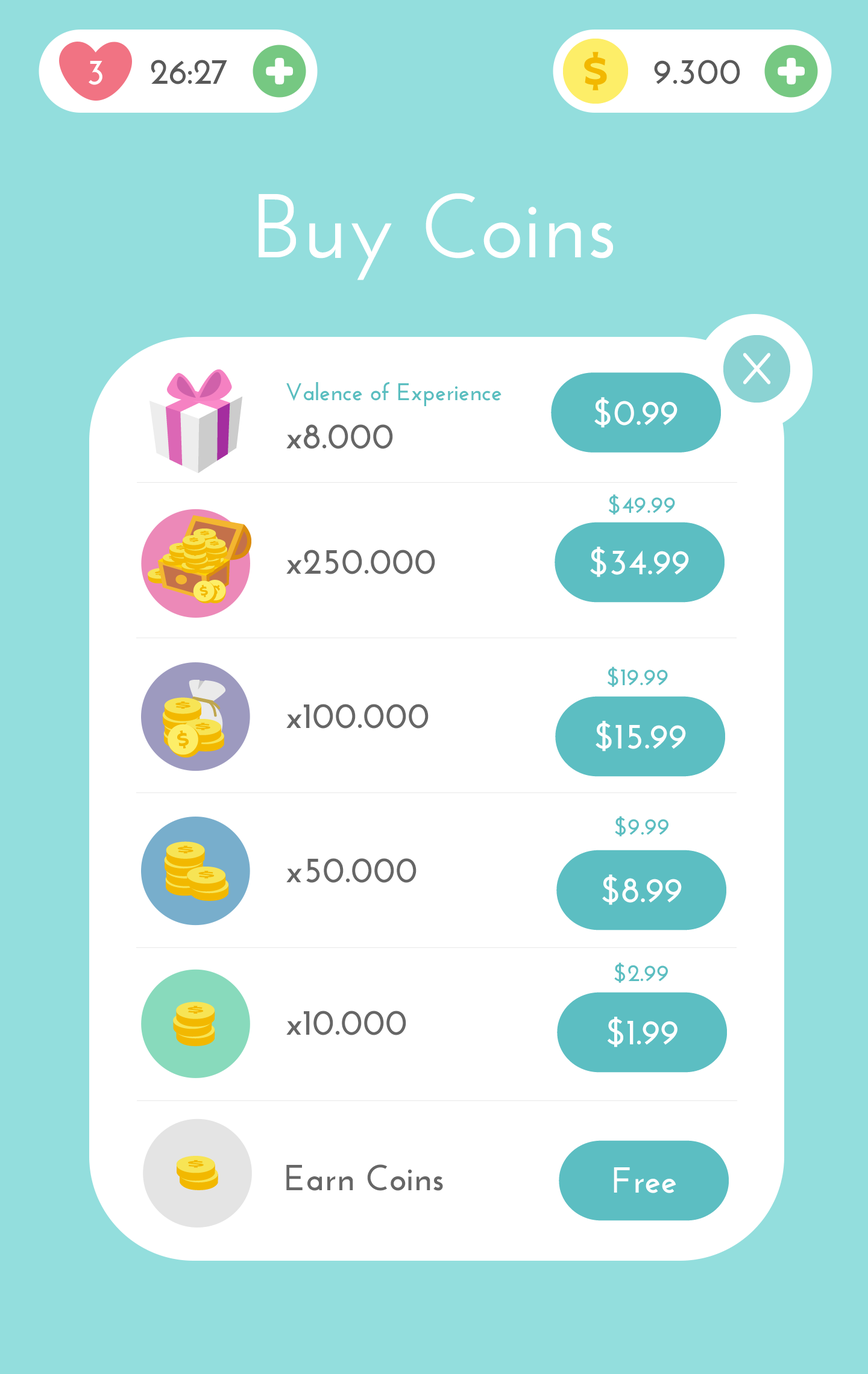
<style>
.page{position:relative;width:868px;height:1374px;background:#ffffff}
.page>*{position:absolute;margin:0}
.t1{font:36.2px "JosefinSans-Bold";color:#ffffff}
.t2{font:36.2px "JosefinSans-Bold";color:#595959}
.t3{font:90.4px "JosefinSans-SemiBold";color:#ffffff}
.t4{font:24.1px "JosefinSans-Bold";color:#5abec0}
.t5{font:36.2px "JosefinSans-Bold";color:#666666}
.t6{font:24.1px "JosefinSans-Bold";color:#5bbec1}
</style>
<div class="page">
<p class="t1" style="left:89px;top:61px;width:13px;height:24px">3</p>
<p class="t2" style="left:151px;top:60px;width:76px;height:24px">26:27</p>
<p class="t2" style="left:654px;top:60px;width:86px;height:24px">9.300</p>
<p class="t3" style="left:259px;top:193px;width:354px;height:87px">Buy Coins</p>
<p class="t4" style="left:286px;top:382px;width:215px;height:24px">Valence of Experience</p>
<p class="t1" style="left:594px;top:397px;width:83px;height:31px">$0.99</p>
<p class="t5" style="left:286px;top:424px;width:107px;height:25px">x8.000</p>
<p class="t6" style="left:609px;top:494px;width:66px;height:21px">$49.99</p>
<p class="t5" style="left:286px;top:550px;width:149px;height:24px">x250.000</p>
<p class="t1" style="left:590px;top:547px;width:99px;height:30px">$34.99</p>
<p class="t6" style="left:607px;top:667px;width:61px;height:20px">$19.99</p>
<p class="t5" style="left:286px;top:704px;width:142px;height:25px">x100.000</p>
<p class="t1" style="left:595px;top:721px;width:91px;height:31px">$15.99</p>
<p class="t6" style="left:615px;top:816px;width:53px;height:20px">$9.99</p>
<p class="t5" style="left:286px;top:858px;width:130px;height:25px">x50.000</p>
<p class="t1" style="left:602px;top:874px;width:80px;height:31px">$8.99</p>
<p class="t6" style="left:614px;top:962px;width:54px;height:21px">$2.99</p>
<p class="t5" style="left:286px;top:1011px;width:120px;height:24px">x10.000</p>
<p class="t1" style="left:607px;top:1017px;width:70px;height:30px">$1.99</p>
<p class="t5" style="left:286px;top:1164px;width:157px;height:27px">Earn Coins</p>
<p class="t1" style="left:614px;top:1167px;width:62px;height:26px">Free</p>
</div>
